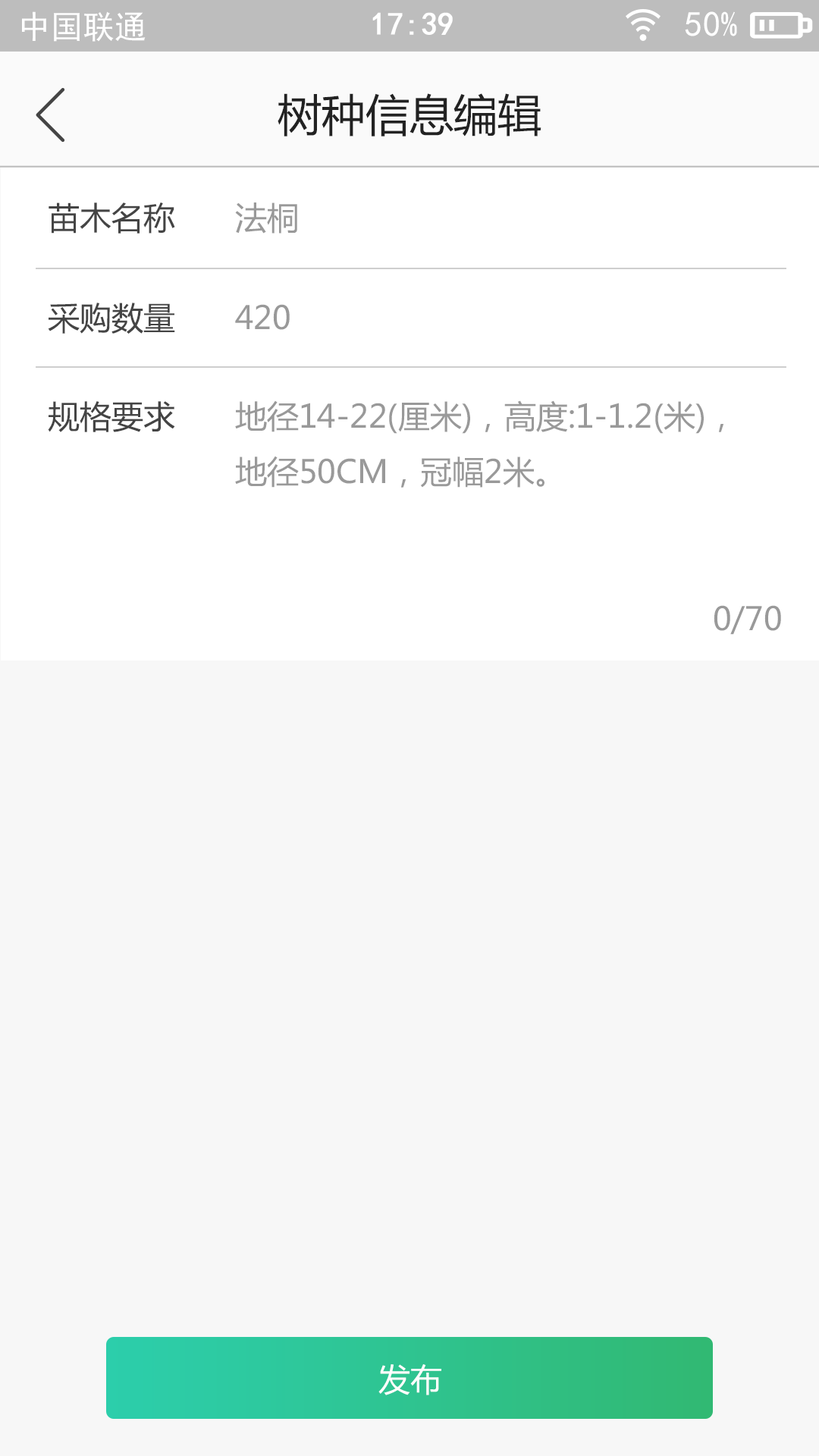
<style>
.page{position:relative;width:819px;height:1456px;background:#f7f7f7}
.page>*{position:absolute;margin:0}
.t1{font:31.8px "SimHei";color:#ffffff}
.t2{font:31.8px "SimHei";color:#ffffff;font-weight:bold}
.t3{font:35.2px "SimHei";color:#ffffff}
.t4{font:43.9px "MicrosoftYaHei";color:#222222}
.t5{font:31.9px "MicrosoftYaHei";color:#444444}
.t6{font:31.9px "MicrosoftYaHei";color:#999999}
.t7{font:31.9px "MicrosoftYaHei";color:#ffffff}
</style>
<div class="page">
<p class="t1" style="left:22px;top:11px;width:124px;height:31px">中国联通</p>
<p class="t2" style="left:372px;top:12px;width:81px;height:23px">17:39</p>
<p class="t3" style="left:685px;top:11px;width:52px;height:25px">50%</p>
<p class="t4" style="left:278px;top:93px;width:263px;height:43px">树种信息编辑</p>
<p class="t5" style="left:49px;top:202px;width:126px;height:32px">苗木名称</p>
<p class="t6" style="left:235px;top:202px;width:62px;height:32px">法桐</p>
<p class="t5" style="left:48px;top:303px;width:127px;height:31px">采购数量</p>
<p class="t6" style="left:235px;top:304px;width:55px;height:26px">420</p>
<p class="t5" style="left:48px;top:401px;width:127px;height:31px">规格要求</p>
<p class="t6" style="left:235px;top:400px;width:488px;height:88px">地径14-22(厘米)，高度:1-1.2(米)，地径50CM，冠幅2米。</p>
<p class="t6" style="left:714px;top:605px;width:67px;height:30px">0/70</p>
<p class="t7" style="left:378px;top:1364px;width:63px;height:31px">发布</p>
</div>
